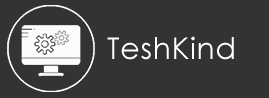
<style>
.page{position:relative;width:269px;height:98px;background:#333333}
.page>*{position:absolute;margin:0}
.t1{font:30px "CenturyGothic";letter-spacing:0.02em;color:#ffffff}
</style>
<div class="page">
<p class="t1" style="left:107px;top:36px;width:127px;height:24px">TeshKind</p>
</div>
